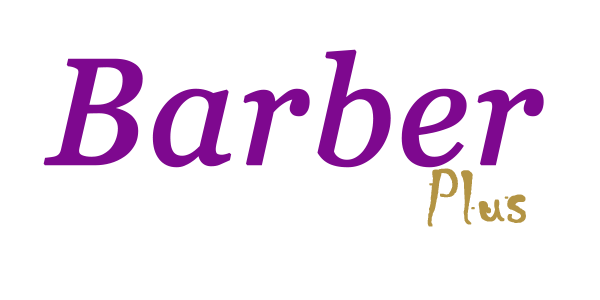
<style>
.page{position:relative;width:600px;height:300px;background:#ffffff}
.page>*{position:absolute;margin:0}
.t1{font:150px "Georgia-Italic";color:#7e088f;font-weight:bold}
.t2{font:80.1px "Chiller-Regular";color:#b39444;font-weight:bold}
</style>
<div class="page">
<p class="t1" style="left:43px;top:49px;width:501px;height:119px">Barber</p>
<p class="t2" style="left:427px;top:168px;width:99px;height:59px;rotate:-1deg">Plus</p>
</div>
